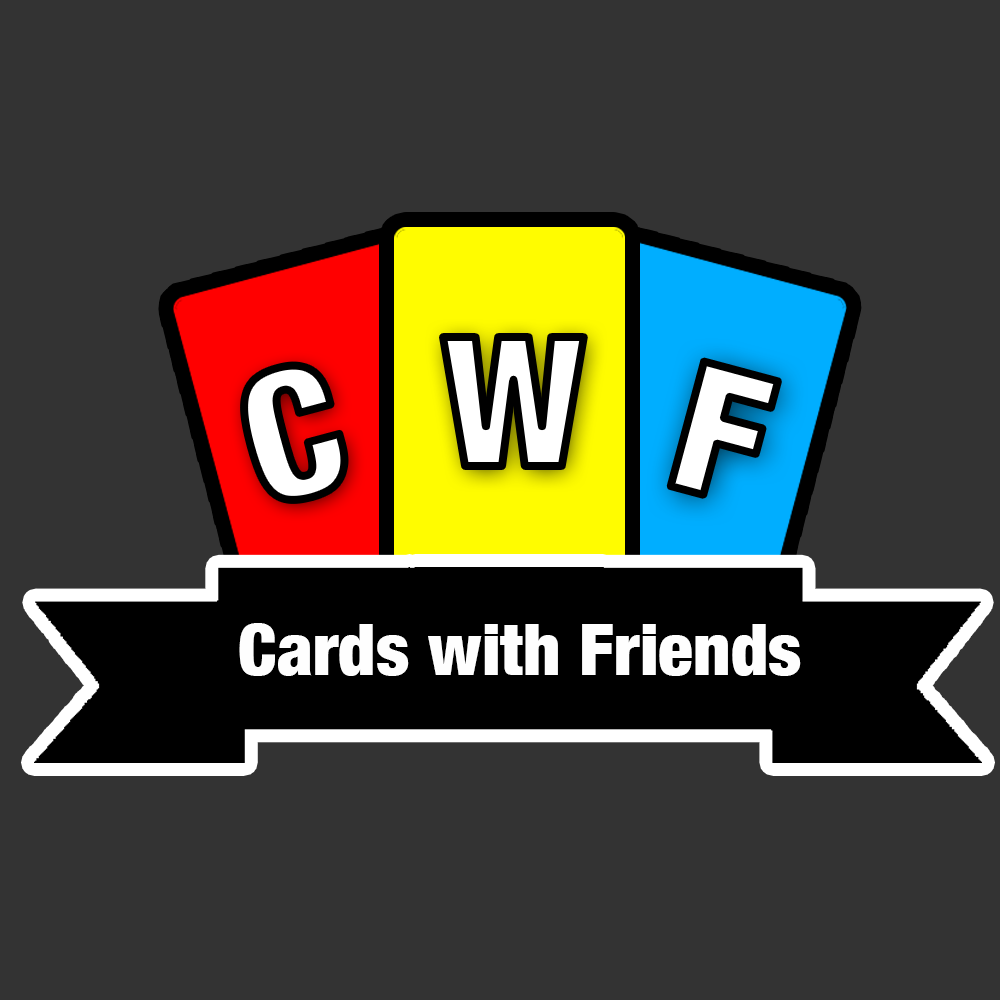
<style>
.page{position:relative;width:1000px;height:1000px;background:#333333}
.page>*{position:absolute;margin:0}
.t1{font:180.7px "HelveticaNeue-CondensedBlack";color:#ffffff}
.t2{font:72.3px "HelveticaNeue-CondensedBlack";color:#fefefe}
</style>
<div class="page">
<p class="t1" style="left:443px;top:337px;width:141px;height:129px">W</p>
<p class="t1" style="left:244px;top:365px;width:101px;height:135px;rotate:-15deg">C</p>
<p class="t1" style="left:670px;top:361px;width:108px;height:134px;rotate:15deg">F</p>
<p class="t2" style="left:239px;top:623px;width:562px;height:53px">Cards with Friends</p>
</div>
